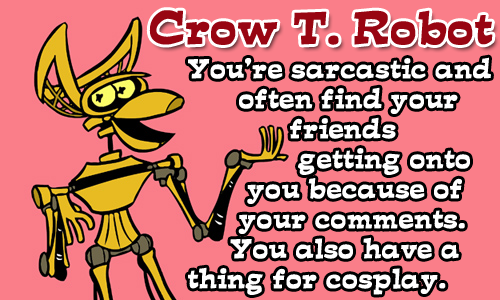
<style>
.page{position:relative;width:500px;height:300px;background:#fa7e89}
.page>*{position:absolute;margin:0}
.t1{font:41.7px "d......";color:#980512;font-weight:bold}
.t2{font:25px "d......";color:#ffffff;font-weight:bold}
</style>
<div class="page">
<p class="t1" style="left:149px;top:10px;width:344px;height:35px">Crow T. Robot</p>
<p class="t2" style="left:188px;top:57px;width:303px;height:238px">You’re sarcastic and<br>      often find your<br>            friends  <br>             getting onto <br>       you because of <br>      your comments.   <br>     You also have a thing for cosplay.</p>
</div>
